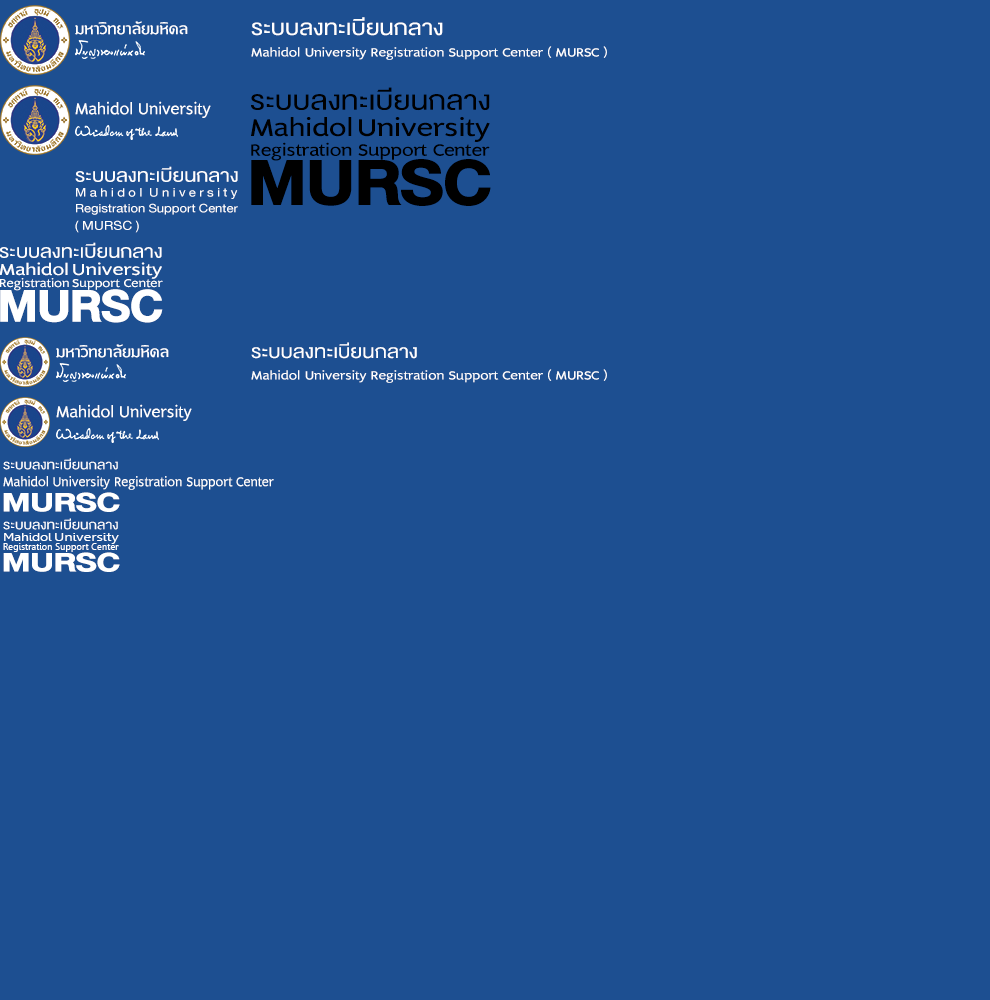
<style>
.page{position:relative;width:990px;height:1000px;background:#1d4f91}
.page>*{position:absolute;margin:0}
.t1{font:30px "DBHelvethaicaX-55Regular";color:#ffffff;scale:1.13 1}
.t2{font:20px "DBLimX";color:#ffffff}
.t3{font:15.1px "DBLimX";color:#ffffff;scale:1.13 1}
.t4{font:37.5px "DBHelvethaicaX-55Regular";color:#000000;scale:1.13 1}
.t5{font:30.7px "DBLimX";color:#000000;scale:1.16 1}
.t6{font:30.7px "DBLimX";color:#000000;scale:1.19 1}
.t7{font:21px "DBLimX";color:#000000;scale:1.13 1}
.t8{font:92px "DBHelvethaicaX-85Blk";color:#000000;scale:1.04 1}
.t9{font:25.5px "DBHelvethaicaX-55Regular";color:#ffffff;scale:1.13 1}
.t10{font:17.3px "DBHelvethaicaX-55Regular";color:#ffffff;scale:1.13 1}
.t11{font:17px "DBHelvethaicaX-55Regular";color:#ffffff;scale:1.13 1}
.t12{font:18px "DBHelvethaicaX-55Regular";color:#ffffff;scale:1.13 1}
.t13{font:20px "DBLimX";color:#ffffff;scale:1.21 1}
.t14{font:20px "DBLimX";color:#ffffff;scale:1.24 1}
.t15{font:14.5px "DBLimX";color:#ffffff;scale:1.13 1}
.t16{font:65px "DBHelvethaicaX-85Blk";color:#ffffff}
.t17{font:26px "DBHelvethaicaX-55Regular";color:#ffffff;scale:1.13 1}
.t18{font:16.6px "DBLimX";color:#ffffff;scale:0.95 1}
.t19{font:38.1px "DBHelvethaicaX-85Blk";color:#ffffff;scale:1.22 1}
.t20{font:10.9px "Leelawadee";color:#ffffff;scale:1.25 1}
.t21{font:10.9px "Leelawadee";color:#ffffff;scale:1.37 1}
.t22{font:10.1px "Leelawadee";color:#ffffff;scale:0.93 1}
</style>
<div class="page">
<p class="t1" style="left:251px;top:17px;width:192px;height:19px">ระบบลงทะเบียนกลาง</p>
<p class="t2" style="left:75px;top:21px;width:113px;height:14px">มหาวิทยาลัยมหิดล</p>
<p class="t3" style="left:251px;top:46px;width:356px;height:14px">Mahidol University Registration Support Center ( MURSC )</p>
<p class="t4" style="left:251px;top:87px;width:239px;height:24px">ระบบลงทะเบียนกลาง</p>
<p class="t2" style="left:75px;top:101px;width:136px;height:17px">Mahidol University</p>
<p class="t5" style="left:251px;top:117px;width:101px;height:20px">Mahidol</p>
<p class="t6" style="left:359px;top:117px;width:131px;height:25px">University</p>
<p class="t7" style="left:251px;top:142px;width:101px;height:19px">Registration</p>
<p class="t7" style="left:358px;top:144px;width:132px;height:16px">Support Center</p>
<p class="t8" style="left:251px;top:159px;width:240px;height:47px">MURSC</p>
<p class="t9" style="left:75px;top:166px;width:163px;height:16px">ระบบลงทะเบียนกลาง</p>
<p class="t10" style="left:76px;top:188px;width:162px;height:11px">M a h i d o l  U n i v e r s i t y</p>
<p class="t11" style="left:76px;top:203px;width:162px;height:12px">Registration Support Center</p>
<p class="t12" style="left:75px;top:220px;width:64px;height:13px">( MURSC )</p>
<p class="t9" style="left:0px;top:242px;width:162px;height:16px">ระบบลงทะเบียนกลาง</p>
<p class="t13" style="left:0px;top:262px;width:68px;height:14px">Mahidol</p>
<p class="t14" style="left:73px;top:262px;width:89px;height:17px">University</p>
<p class="t15" style="left:0px;top:278px;width:69px;height:13px">Registration</p>
<p class="t15" style="left:72px;top:279px;width:91px;height:11px">Support Center</p>
<p class="t16" style="left:0px;top:289px;width:163px;height:34px">MURSC</p>
<p class="t17" style="left:251px;top:342px;width:166px;height:17px">ระบบลงทะเบียนกลาง</p>
<p class="t2" style="left:56px;top:344px;width:113px;height:14px">มหาวิทยาลัยมหิดล</p>
<p class="t3" style="left:251px;top:369px;width:356px;height:14px">Mahidol University Registration Support Center ( MURSC )</p>
<p class="t2" style="left:56px;top:404px;width:136px;height:17px">Mahidol University</p>
<p class="t12" style="left:3px;top:458px;width:115px;height:12px">ระบบลงทะเบียนกลาง</p>
<p class="t18" style="left:3px;top:476px;width:271px;height:14px">Mahidol University Registration Support Center</p>
<p class="t19" style="left:3px;top:492px;width:117px;height:20px">MURSC</p>
<p class="t12" style="left:3px;top:518px;width:115px;height:12px">ระบบลงทะเบียนกลาง</p>
<p class="t20" style="left:4px;top:533px;width:48px;height:8px">Mahidol</p>
<p class="t21" style="left:55px;top:533px;width:64px;height:11px">University</p>
<p class="t22" style="left:3px;top:543px;width:116px;height:9px">Registration Support Center</p>
<p class="t19" style="left:3px;top:552px;width:117px;height:20px">MURSC</p>
</div>
